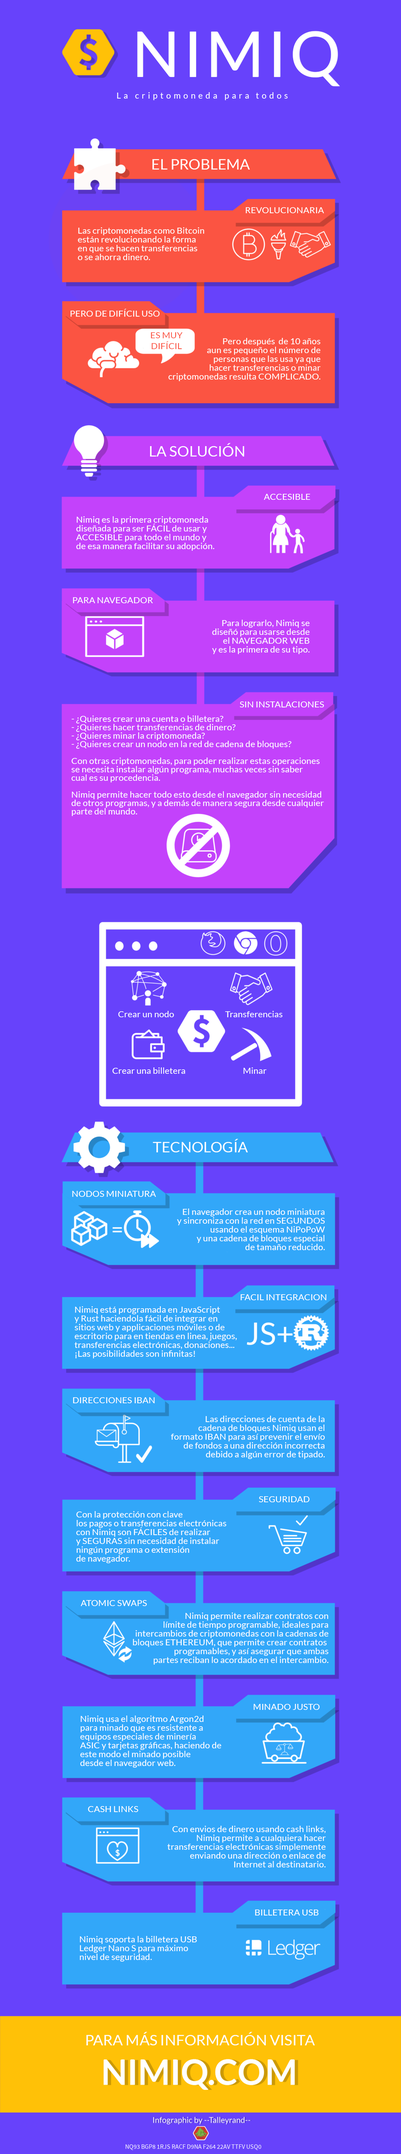
<style>
.page{position:relative;width:401px;height:2154px;background:#6742fb}
.page>*{position:absolute;margin:0}
.t1{font:62.9px "Lato-Regular";letter-spacing:0.055em;color:#ffffff}
.t2{font:8.4px "Lato-Regular";letter-spacing:0.33em;color:#ffffff}
.t3{font:14.8px "Lato-Regular";color:#ffffff}
.t4{font:9px "Lato-Regular";color:#ffffff}
.t5{font:9px/8.8px "Lato-Regular";color:#ffffff}
.t6{font:9px "Lato-Regular";color:#fb5442}
.t7{font:9px/8.4px "Lato-Regular";color:#ffffff}
.t8{font:34.7px "Lato-Regular";color:#ffffff}
</style>
<div class="page">
<p class="t1" style="left:137px;top:31px;width:203px;height:55px">NIMIQ</p>
<p class="t2" style="left:117px;top:92px;width:171px;height:8px">La criptomoneda para todos</p>
<p class="t3" style="left:152px;top:159px;width:98px;height:11px">EL PROBLEMA</p>
<p class="t4" style="left:246px;top:207px;width:78px;height:6px">REVOLUCIONARIA</p>
<p class="t5" style="left:78px;top:227px;width:126px;height:33px">Las criptomonedas como Bitcoin<br>están revolucionando la forma<br>en que se hacen transferencias<br>o se ahorra dinero.</p>
<p class="t4" style="left:71px;top:309px;width:89px;height:8px">PERO DE DIFÍCIL USO</p>
<p class="t6" style="left:151px;top:332px;width:31px;height:17px;text-align:center">ES MUY<br>DIFÍCIL</p>
<p class="t5" style="left:168px;top:338px;width:153px;height:43px;text-align:right">Pero después  de 10 años<br>aun es pequeño el número de<br>personas que las usa ya que<br>hacer transferencias o minar<br> criptomonedas resulta COMPLICADO.</p>
<p class="t3" style="left:150px;top:443px;width:94px;height:14px">LA SOLUCIÓN</p>
<p class="t4" style="left:264px;top:494px;width:46px;height:6px">ACCESIBLE</p>
<p class="t5" style="left:76px;top:516px;width:138px;height:35px">Nimiq es la primera criptomoneda<br>diseñada para ser FÁCIL de usar y<br>ACCESIBLE para todo el mundo y <br>de esa manera facilitar su adopción.</p>
<p class="t4" style="left:73px;top:597px;width:80px;height:6px">PARA NAVEGADOR</p>
<p class="t5" style="left:212px;top:620px;width:97px;height:34px;text-align:right">Para lograrlo, Nimiq se<br>diseñó para usarse desde<br>el NAVEGADOR WEB<br>y es la primera de su tipo.</p>
<p class="t4" style="left:240px;top:701px;width:84px;height:6px">SIN INSTALACIONES</p>
<p class="t7" style="left:71px;top:716px;width:253px;height:100px">- ¿Quieres crear una cuenta o billetera?<br>- ¿Quieres hacer transferencias de dinero?<br>- ¿Quieres minar la criptomoneda?<br>- ¿Quieres crear un nodo en la red de cadena de bloques?<br><br>Con otras criptomonedas, para poder realizar estas operaciones<br>se necesita instalar algún programa, muchas veces sin saber<br>cual es su procedencia.<br><br>Nimiq permite hacer todo esto desde el navegador sin necesidad<br>de otros programas, y a demás de manera segura desde cualquier<br>parte del mundo.</p>
<p class="t4" style="left:118px;top:1011px;width:56px;height:6px">Crear un nodo</p>
<p class="t4" style="left:225px;top:1011px;width:58px;height:6px">Transferencias</p>
<p class="t4" style="left:112px;top:1067px;width:73px;height:7px">Crear una billetera</p>
<p class="t4" style="left:243px;top:1067px;width:24px;height:7px">Minar</p>
<p class="t3" style="left:153px;top:1139px;width:95px;height:13px">TECNOLOGÍA</p>
<p class="t4" style="left:72px;top:1191px;width:84px;height:6px">NODOS MINIATURA</p>
<p class="t5" style="left:177px;top:1209px;width:148px;height:41px;text-align:right">El navegador crea un nodo miniatura<br>y sincroniza con la red en SEGUNDOS<br> usando el esquema NiPoPoW<br>y una cadena de bloques especial<br>de tamaño reducido.</p>
<p class="t4" style="left:241px;top:1294px;width:85px;height:6px">FACIL INTEGRACION</p>
<p class="t5" style="left:75px;top:1306px;width:162px;height:52px">Nimiq está programada en JavaScript <br>y Rust haciendola fácil de integrar en<br>sitios web y applicaciones móviles o de<br>escritorio para en tiendas en linea, juegos,<br>transferencias electrónicas, donaciones...<br>¡Las posibilidades son infinitas!</p>
<p class="t4" style="left:73px;top:1397px;width:82px;height:6px">DIRECCIONES IBAN</p>
<p class="t5" style="left:171px;top:1416px;width:154px;height:43px;text-align:right">Las direcciones de cuenta de la<br>cadena de bloques Nimiq usan el<br> formato IBAN para así prevenir el envío<br>de fondos a una dirección incorrecta<br> debido a algún error de tipado.</p>
<p class="t4" style="left:259px;top:1496px;width:50px;height:6px">SEGURIDAD</p>
<p class="t5" style="left:76px;top:1511px;width:150px;height:52px">Con la protección con clave<br>los pagos o transferencias electrónicas<br>con Nimiq son FÁCILES de realizar<br>y SEGURAS sin necesidad de instalar<br>ningún programa o extensión<br>de navegador.</p>
<p class="t4" style="left:81px;top:1600px;width:66px;height:6px">ATOMIC SWAPS</p>
<p class="t5" style="left:133px;top:1613px;width:195px;height:52px;text-align:right">Nimiq permite realizar contratos con<br>límite de tiempo programable, ideales para<br>intercambios de criptomonedas con la cadenas de<br>bloques ETHEREUM, que permite crear contratos <br>programables, y así asegurar que ambas<br>partes reciban lo acordado en el intercambio.</p>
<p class="t4" style="left:253px;top:1704px;width:66px;height:6px">MINADO JUSTO</p>
<p class="t5" style="left:80px;top:1716px;width:141px;height:52px">Nimiq usa el algoritmo Argon2d<br>para minado que es resistente a<br>equipos especiales de minería<br>ASIC y tarjetas gráficas, haciendo de<br>este modo el minado posible<br>desde el navegador web.</p>
<p class="t4" style="left:88px;top:1806px;width:50px;height:6px">CASH LINKS</p>
<p class="t5" style="left:167px;top:1826px;width:159px;height:42px;text-align:right">Con envios de dinero usando cash links,<br>Nimiq permite a cualquiera hacer<br>transferencias electrónicas simplemente<br>enviando una dirección o enlace de<br> Internet al destinatario.</p>
<p class="t4" style="left:255px;top:1910px;width:64px;height:6px">BILLETERA USB</p>
<p class="t5" style="left:80px;top:1936px;width:117px;height:26px">Nimiq soporta la billetera USB<br>Ledger Nano S para máximo<br>nivel de seguridad.</p>
<p class="t3" style="left:86px;top:2032px;width:229px;height:13px">PARA MÁS INFORMACIÓN VISITA</p>
<p class="t8" style="left:104px;top:2059px;width:190px;height:31px">NIMIQ.COM</p>
</div>
